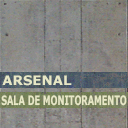
<style>
.page{position:relative;width:128px;height:128px}
.page>*{position:absolute;margin:0}
.t1{font:13px "Verdana-Bold";color:#e7e7c6}
.t2{font:13px "Verdana-Bold";color:#e7e7c6;scale:0.63 1}
</style>
<div class="page">
<p class="t1" style="left:2px;top:75px;width:70px;height:11px">ARSENAL</p>
<p class="t2" style="left:1px;top:95px;width:126px;height:11px">SALA DE MONITORAMENTO</p>
</div>
